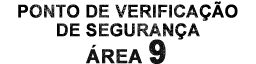
<style>
.page{position:relative;width:256px;height:64px;background:#ffffff}
.page>*{position:absolute;margin:0}
.t1{font:17.2px/18.7px "Arial-BoldMT";letter-spacing:0.005em;color:#000000;text-transform:uppercase;font-weight:bold}
.t2{font:18.5px "Arial-BoldMT";letter-spacing:0.005em;color:#000000;text-transform:uppercase;font-weight:bold}
</style>
<div class="page">
<p class="t1" style="left:18px;top:1px;width:220px;height:39px;text-align:center">ponto de VERIFICAÇÃO<br>de segurança</p>
<p class="t2" style="left:91px;top:44px;width:6px;height:4px">´</p>
</div>
